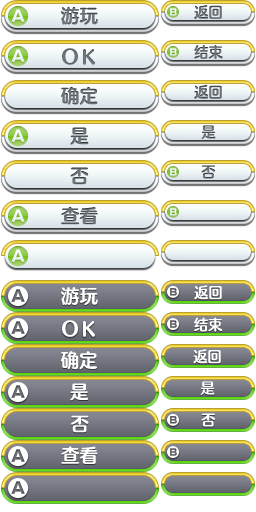
<style>
.page{position:relative;width:256px;height:512px;background:#ffffff}
.page>*{position:absolute;margin:0}
.t1{font:18.7px "FZFW-QingYinTiS-B--GB1-0";color:#6e737b}
.t2{font:14.7px "FZFW-QingYinTiS-B--GB1-0";color:#6e737b}
.t3{font:14.7px "FZFW-QingYinTiS-B--GB1-0"}
.t4{font:18.7px "FZFW-QingYinTiS-B--GB1-0"}
.t5{font:18.9px "FZFW-QingYinTiS-B--GB1-0";color:#ffffff}
.t6{font:14.8px "FZFW-QingYinTiS-B--GB1-0";color:#ffffff}
.t7{font:14.9px "FZFW-QingYinTiS-B--GB1-0";color:#ffffff;scale:0.96 1}
.t8{font:18.5px "FZFW-QingYinTiS-B--GB1-0";color:#ffffff}
.t9{font:14.5px "FZFW-QingYinTiS-B--GB1-0";color:#ffffff}
.t10{font:18.7px "FZFW-QingYinTiS-B--GB1-0";color:#ffffff}
</style>
<div class="page">
<p class="t1" style="left:60px;top:6px;width:38px;height:19px">游玩</p>
<p class="t2" style="left:194px;top:5px;width:28px;height:14px">返回</p>
<p class="t2" style="left:194px;top:45px;width:29px;height:14px">结束</p>
<p class="t1" style="left:61px;top:86px;width:37px;height:19px">确定</p>
<p class="t2" style="left:194px;top:85px;width:28px;height:14px">返回</p>
<p class="t3" style="left:201px;top:125px;width:15px;height:14px">是</p>
<p class="t4" style="left:70px;top:127px;width:19px;height:18px">是</p>
<p class="t4" style="left:70px;top:167px;width:19px;height:18px">否</p>
<p class="t3" style="left:201px;top:165px;width:15px;height:14px">否</p>
<p class="t4" style="left:61px;top:206px;width:37px;height:19px">查看</p>
<p class="t5" style="left:61px;top:287px;width:37px;height:18px">游玩</p>
<p class="t6" style="left:194px;top:285px;width:28px;height:15px">返回</p>
<p class="t6" style="left:194px;top:317px;width:29px;height:15px">结束</p>
<p class="t5" style="left:60px;top:351px;width:37px;height:19px">确定</p>
<p class="t7" style="left:193px;top:349px;width:28px;height:15px">返回</p>
<p class="t8" style="left:70px;top:383px;width:19px;height:18px">是</p>
<p class="t9" style="left:200px;top:381px;width:15px;height:14px">是</p>
<p class="t9" style="left:201px;top:413px;width:14px;height:14px">否</p>
<p class="t8" style="left:71px;top:415px;width:18px;height:18px">否</p>
<p class="t10" style="left:61px;top:446px;width:37px;height:18px">查看</p>
</div>
